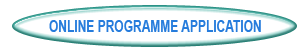
<style>
.page{position:relative;width:300px;height:50px;background:#ffffff}
.page>*{position:absolute;margin:0}
.t1{font:16.8px "Arial-BoldMT";color:#267cdc;scale:0.71 1}
</style>
<div class="page">
<p class="t1" style="left:49px;top:20px;width:212px;height:12px">ONLINE PROGRAMME APPLICATION</p>
</div>
